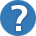
<style>
.page{position:relative;width:36px;height:36px;background:#347ab7}
.page>*{position:absolute;margin:0}
.t1{font:36.4px "FrutigerLTStd-Bold";letter-spacing:-0.005em;color:#ffffff}
</style>
<div class="page">
<p class="t1" style="left:11px;top:5px;width:17px;height:26px">?</p>
</div>
